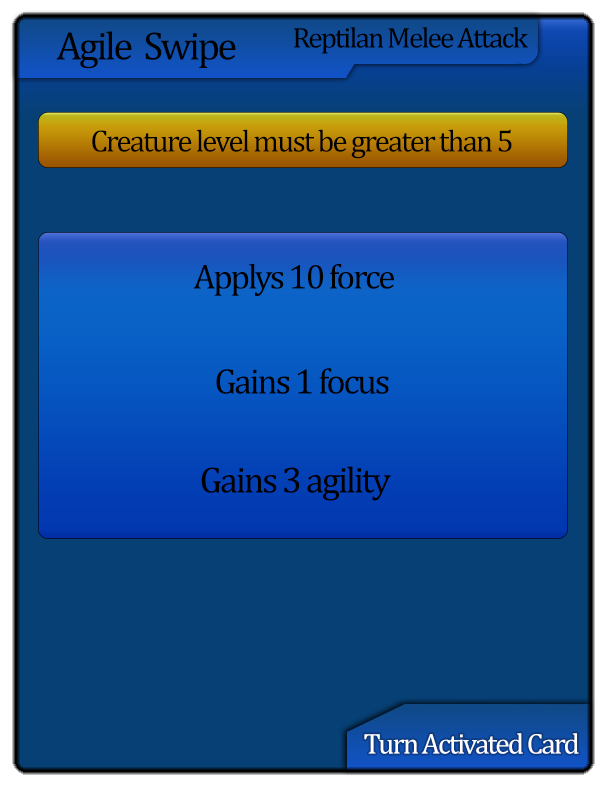
<style>
.page{position:relative;width:612px;height:792px;background:#064075}
.page>*{position:absolute;margin:0}
.t1{font:29px "CambriaMath";letter-spacing:-0.06em;color:#000000}
.t2{font:40px "CambriaMath";letter-spacing:-0.06em;color:#000000}
.t3{font:31px "CambriaMath";letter-spacing:-0.06em;color:#000000}
.t4{font:35px "CambriaMath";letter-spacing:-0.06em;color:#000000}
.t5{font:36px "CambriaMath";letter-spacing:-0.06em;color:#000000}
.t6{font:37px "CambriaMath";letter-spacing:-0.06em;color:#000000}
.t7{font:29px "CambriaMath";letter-spacing:-0.06em;color:#ffffff}
</style>
<div class="page">
<p class="t1" style="left:294px;top:27px;width:234px;height:27px">Reptilan Melee Attack</p>
<p class="t2" style="left:56px;top:31px;width:180px;height:38px">Agile  Swipe</p>
<p class="t3" style="left:92px;top:129px;width:420px;height:30px">Creature level must be greater than 5</p>
<p class="t4" style="left:193px;top:264px;width:201px;height:32px">Applys 10 force</p>
<p class="t5" style="left:216px;top:368px;width:173px;height:26px">Gains 1 focus</p>
<p class="t6" style="left:201px;top:466px;width:190px;height:35px">Gains 3 agility</p>
<p class="t7" style="left:364px;top:733px;width:215px;height:21px">Turn Activated Card</p>
</div>
